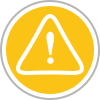
<style>
.page{position:relative;width:100px;height:100px;background:#fcc317}
.page>*{position:absolute;margin:0}
.t1{font:12px/183.3px "KannadaMN-Bold";letter-spacing:-0.01em;color:#ffffff}
</style>
<div class="page">
<p class="t1" style="left:46px;top:31px;width:8px;height:33px;text-align:center">!</p>
</div>
